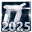
<style>
.page{position:relative;width:32px;height:32px}
.page>*{position:absolute;margin:0}
.t1{font:12px "MicrosoftYaHeiUI-Bold"}
</style>
<div class="page">
<p class="t1" style="left:1px;top:21px;width:30px;height:11px">2025</p>
</div>
